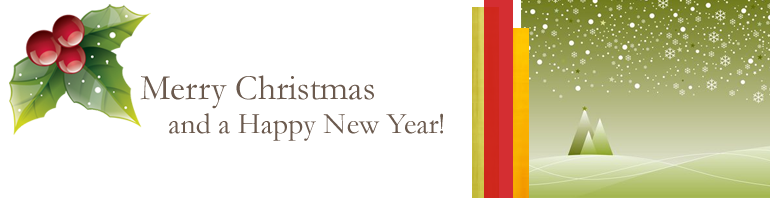
<style>
.page{position:relative;width:770px;height:198px;background:#ffffff}
.page>*{position:absolute;margin:0}
.t1{font:36px "Garamond";color:#6b5a4e}
.t2{font:30px "Garamond";color:#6b5a4e}
</style>
<div class="page">
<p class="t1" style="left:140px;top:75px;width:234px;height:34px">Merry Christmas</p>
<p class="t2" style="left:169px;top:113px;width:274px;height:28px">and a Happy New Year!</p>
</div>
